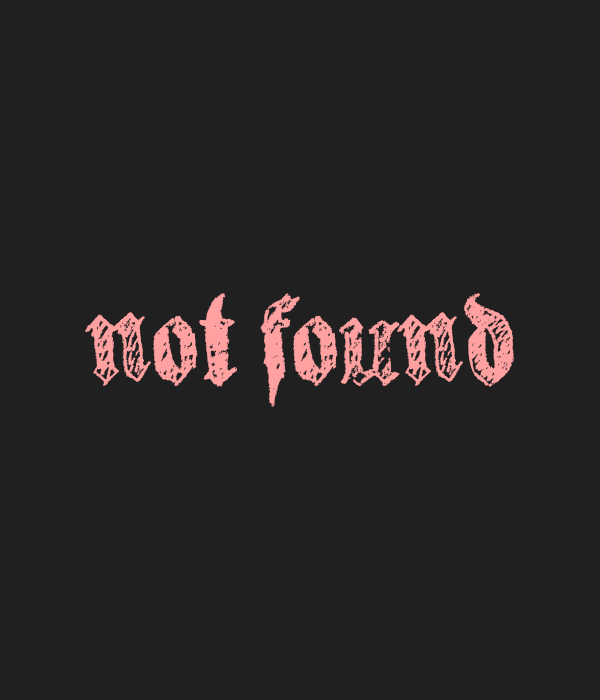
<style>
.page{position:relative;width:600px;height:700px;background:#202020}
.page>*{position:absolute;margin:0}
.t1{font:78px "lafraktouille";color:#ffa1a1}
</style>
<div class="page">
<p class="t1" style="left:85px;top:293px;width:430px;height:114px">NOT FOUND</p>
</div>
